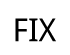
<style>
.page{position:relative;width:70px;height:55px;background:#ffffff}
.page>*{position:absolute;margin:0}
.t1{font:31.8px "DroidSans";color:#000000}
</style>
<div class="page">
<p class="t1" style="left:15px;top:18px;width:41px;height:24px">FIX</p>
</div>
